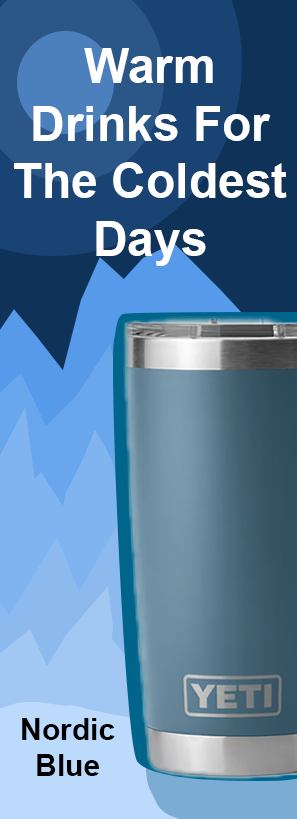
<style>
.page{position:relative;width:297px;height:819px}
.page>*{position:absolute;margin:0}
.t1{font:48px "Arial-BoldMT";color:#ffffff}
.t2{font:30px "Arial-BoldMT";color:#000000}
</style>
<div class="page">
<p class="t1" style="left:14px;top:48px;width:273px;height:218px;text-align:center">Warm Drinks For The Coldest Days</p>
<p class="t2" style="left:22px;top:718px;width:93px;height:58px;text-align:center">Nordic Blue</p>
</div>
